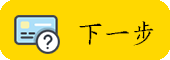
<style>
.page{position:relative;width:170px;height:60px;background:#ffd800}
.page>*{position:absolute;margin:0}
.t1{font:26.7px "¿¬Ìå";color:#000000}
</style>
<div class="page">
<p class="t1" style="left:79px;top:21px;width:75px;height:25px">下一步</p>
</div>
